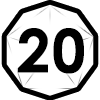
<style>
.page{position:relative;width:100px;height:100px;background:#ffffff}
.page>*{position:absolute;margin:0}
.t1{font:60px "CenturyGothic-Bold";color:#000000;font-weight:bold}
</style>
<div class="page">
<p class="t1" style="left:17px;top:28px;width:67px;height:46px">20</p>
</div>
